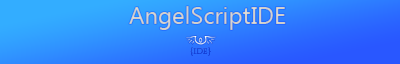
<style>
.page{position:relative;width:400px;height:64px}
.page>*{position:absolute;margin:0}
.t1{font:24px "LaoUI";color:#cfcfcf}
</style>
<div class="page">
<p class="t1" style="left:129px;top:6px;width:157px;height:24px">AngelScriptIDE</p>
</div>
